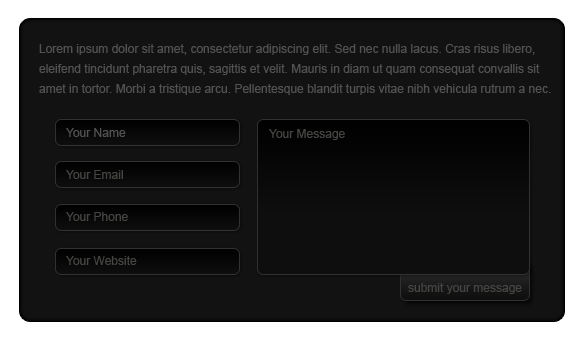
<style>
.page{position:relative;width:584px;height:340px;background:#121212}
.page>*{position:absolute;margin:0}
.t1{font:12px/20px "ArialMT";color:#535151}
.t2{font:12px "ArialMT";color:#535151}
.t3{font:12px "ArialMT";color:#464542}
</style>
<div class="page">
<p class="t1" style="left:39px;top:44px;width:512px;height:51px">Lorem ipsum dolor sit amet, consectetur adipiscing elit. Sed nec nulla lacus. Cras risus libero,<br>eleifend tincidunt pharetra quis, sagittis et velit. Mauris in diam ut quam consequat convallis sit<br>amet in tortor. Morbi a tristique arcu. Pellentesque blandit turpis vitae nibh vehicula rutrum a nec.</p>
<p class="t2" style="left:66px;top:128px;width:60px;height:9px">Your Name</p>
<p class="t3" style="left:269px;top:129px;width:76px;height:11px">Your Message</p>
<p class="t3" style="left:66px;top:170px;width:57px;height:9px">Your Email</p>
<p class="t3" style="left:66px;top:212px;width:62px;height:9px">Your Phone</p>
<p class="t3" style="left:66px;top:256px;width:71px;height:9px">Your Website</p>
<p class="t3" style="left:408px;top:283px;width:114px;height:11px">submit your message</p>
</div>
